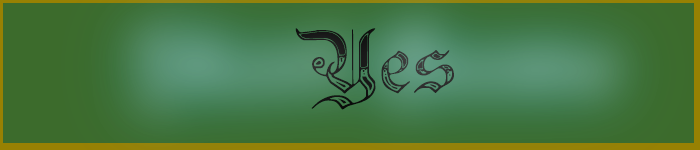
<style>
.page{position:relative;width:700px;height:150px}
.page>*{position:absolute;margin:0}
.t1{font:72px "TeutonicNo4-DemiBold";color:#1b1b1b}
</style>
<div class="page">
<p class="t1" style="left:295px;top:28px;width:159px;height:82px">Yes</p>
</div>
